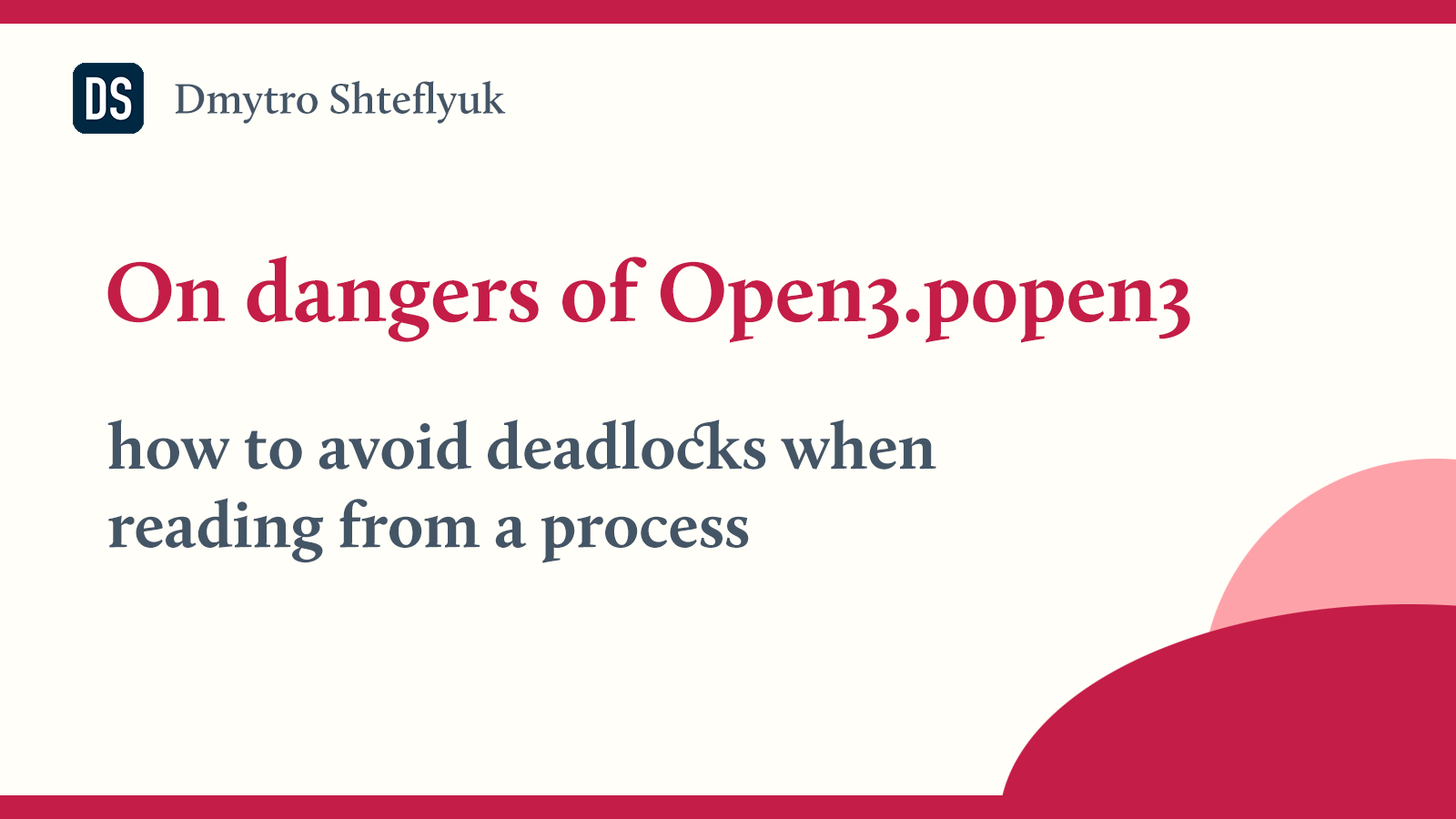
<style>
.page{position:relative;width:1456px;height:819px;background:#fffef8}
.page>*{position:absolute;margin:0}
.t1{font:43.7px "Calluna-Semibold";color:#445566}
.t2{font:87.4px "Calluna-Bold";color:#c41d47}
.t3{font:65.5px "Calluna-Bold";color:#445566}
</style>
<div class="page">
<p class="t1" style="left:175px;top:80px;width:331px;height:44px">Dmytro Shteflyuk</p>
<p class="t2" style="left:107px;top:256px;width:1083px;height:87px">On dangers of Open3.popen3</p>
<p class="t3" style="left:108px;top:420px;width:828px;height:143px">how to avoid deadlocks when <br>reading from a process</p>
</div>
